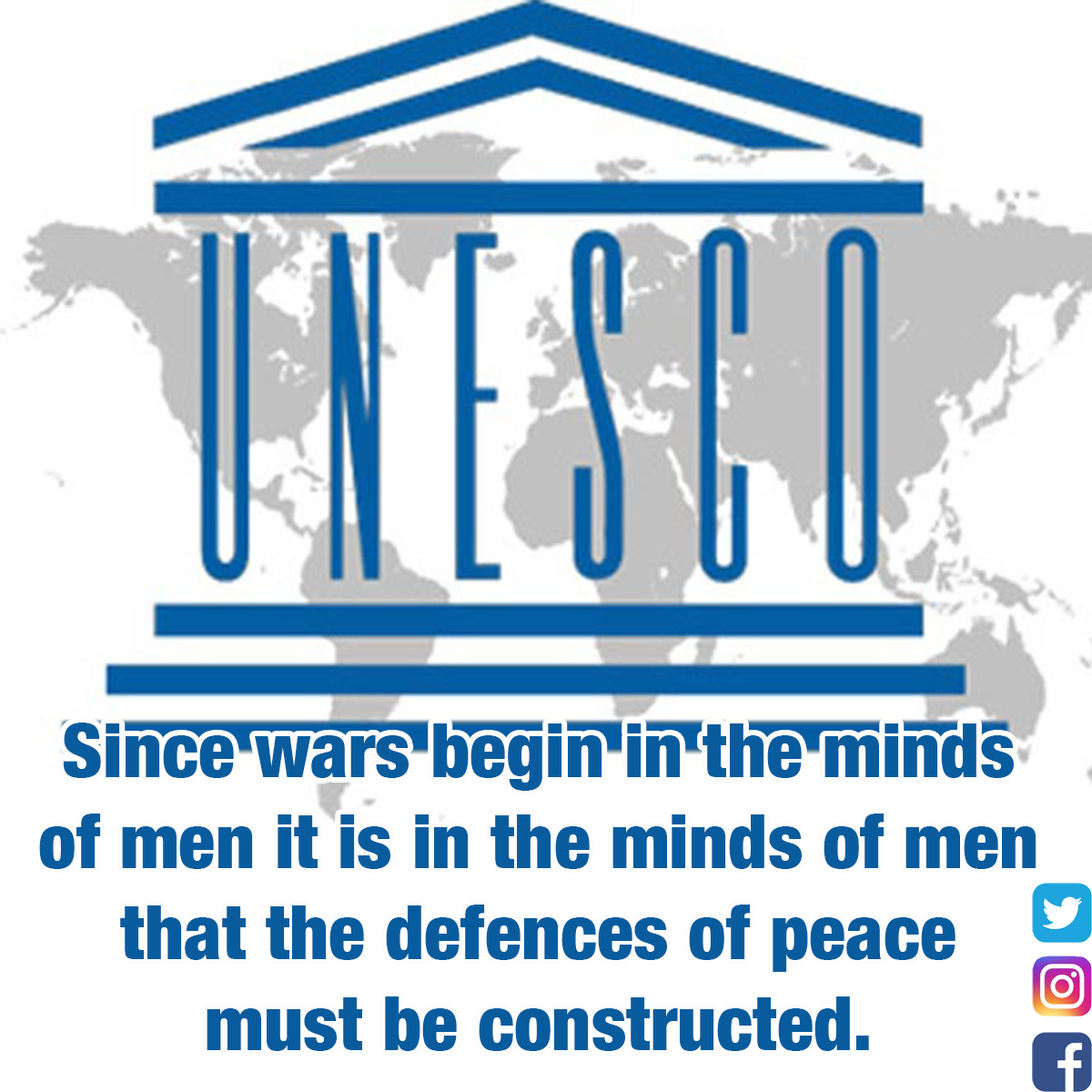
<style>
.page{position:relative;width:1092px;height:1092px;background:#ffffff}
.page>*{position:absolute;margin:0}
.t1{font:75.8px "HelveticaNeue-CondensedBlack";color:#085c9e}
</style>
<div class="page">
<p class="t1" style="left:39px;top:723px;width:997px;height:328px;text-align:center">Since wars begin in the minds of men it is in the minds of men that the defences of peace must be constructed.</p>
</div>
